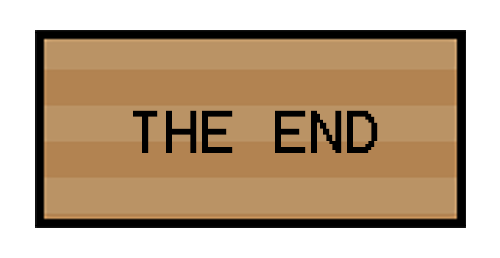
<style>
.page{position:relative;width:500px;height:258px;background:#ffffff}
.page>*{position:absolute;margin:0}
.t1{font:48.4px "Terminal";color:#000000}
</style>
<div class="page">
<p class="t1" style="left:133px;top:110px;width:245px;height:43px">THE END</p>
</div>
